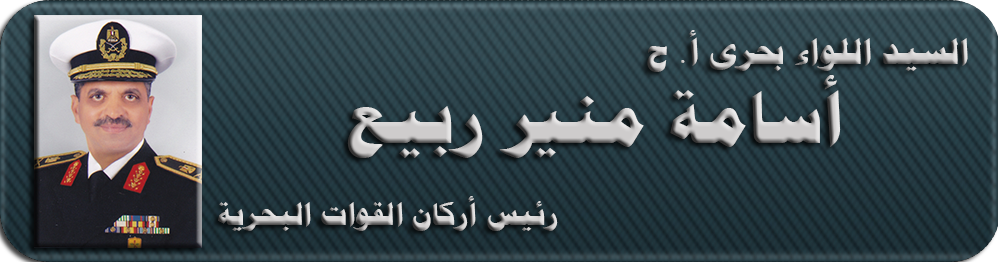
<style>
.page{position:relative;width:998px;height:262px}
.page>*{position:absolute;margin:0}
.t1{font:30px/41px "PTBoldHeading";color:#cecccc;scale:1.15 1}
.t2{font:35px/79px "PTBoldHeading";color:#cecccc;scale:1.15 1}
.t3{font:70px/79px "PTBoldHeading";color:#cecccc;scale:1.15 1}
</style>
<div class="page">
<p class="t1" style="left:218px;top:30px;width:750px;height:201px;text-align:right"><span class="t2">السيد اللواء بحرى أ. ح<br></span><span class="t3">أسامة منير ربيع<br></span><br>رئيس أركان القوات البحرية</p>
</div>
